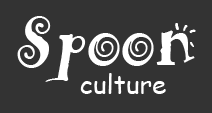
<style>
.page{position:relative;width:212px;height:113px;background:#333333}
.page>*{position:absolute;margin:0}
.t1{font:72px "ARHERMANN";letter-spacing:0.003em;color:#ffffff}
.t2{font:26px "ComicSansMS";letter-spacing:0.003em;color:#ffffff}
</style>
<div class="page">
<p class="t1" style="left:17px;top:16px;width:179px;height:66px">Spoon</p>
<p class="t2" style="left:80px;top:73px;width:86px;height:21px">culture</p>
</div>
